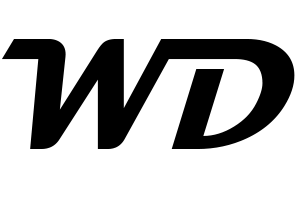
<style>
.page{position:relative;width:300px;height:200px;background:#ffffff}
.page>*{position:absolute;margin:0}
.t1{font:160px "Magneto-Bold";color:#000000}
</style>
<div class="page">
<p class="t1" style="left:2px;top:39px;width:293px;height:110px">WD</p>
</div>
